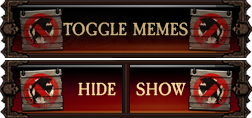
<style>
.page{position:relative;width:252px;height:118px}
.page>*{position:absolute;margin:0}
.t1{font:18px "CaslonAntique";color:#ccb27a}
.t2{font:18px "CaslonAntique";color:#ffdf9a}
</style>
<div class="page">
<p class="t1" style="left:63px;top:22px;width:125px;height:14px">TOGGLE MEMES</p>
<p class="t2" style="left:78px;top:82px;width:38px;height:14px">HIDE</p>
<p class="t2" style="left:136px;top:82px;width:50px;height:14px">SHOW</p>
</div>
